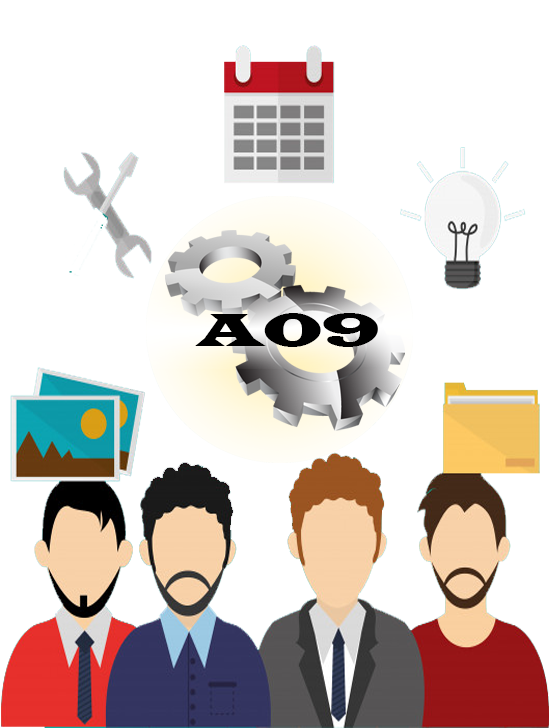
<style>
.page{position:relative;width:549px;height:728px;background:#ffffff}
.page>*{position:absolute;margin:0}
.t1{font:47.9px "LatinWide";color:#000000}
</style>
<div class="page">
<p class="t1" style="left:195px;top:313px;width:183px;height:34px">A09</p>
</div>
